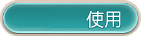
<style>
.page{position:relative;width:141px;height:36px}
.page>*{position:absolute;margin:0}
.t1{font:18px "GothicMB101Pr6N-Light";color:#fffffd}
</style>
<div class="page">
<p class="t1" style="left:86px;top:11px;width:35px;height:17px">使用</p>
</div>
